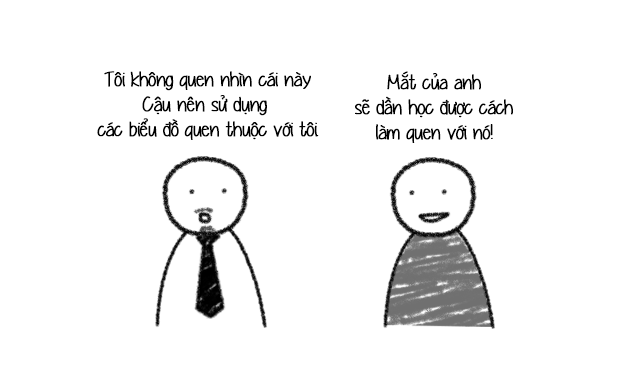
<style>
.page{position:relative;width:617px;height:375px;background:#ffffff}
.page>*{position:absolute;margin:0}
.t1{font:20.8px "UVFYummyCupcakes";letter-spacing:-0.02em;color:#000000;font-weight:bold}
</style>
<div class="page">
<p class="t1" style="left:97px;top:71px;width:222px;height:69px;text-align:center">Tôi không quen nhìn cái này<br>Cậu nên sử dụng <br>các biểu đồ quen thuộc với tôi.</p>
<p class="t1" style="left:355px;top:71px;width:158px;height:72px;text-align:center">Mắt của anh<br>sẽ dần học được cách<br>làm quen với nó!</p>
</div>
